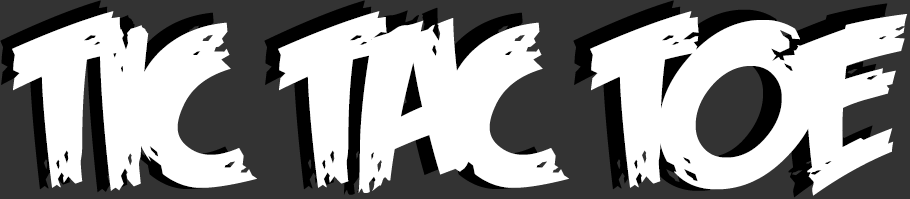
<style>
.page{position:relative;width:910px;height:199px;background:#ffffff}
.page>*{position:absolute;margin:0}
.t1{font:237px "FeastofFleshBB";letter-spacing:-0.05em;color:#ffffff;scale:1.08 1}
</style>
<div class="page">
<p class="t1" style="left:12px;top:11px;width:896px;height:185px">TIC TAC TOE</p>
</div>
